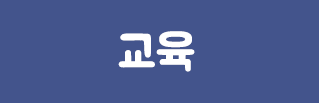
<style>
.page{position:relative;width:319px;height:103px;background:#43548c}
.page>*{position:absolute;margin:0}
.t1{font:48px "BMJUA";color:#ffffff}
</style>
<div class="page">
<p class="t1" style="left:118px;top:31px;width:77px;height:41px">교육</p>
</div>
